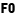
<style>
.page{position:relative;width:16px;height:16px;background:#ffffff}
.page>*{position:absolute;margin:0}
.t1{font:14px "Garaje53Unicase-Black";color:#000000}
</style>
<div class="page">
<p class="t1" style="left:1px;top:3px;width:14px;height:10px">FO</p>
</div>
